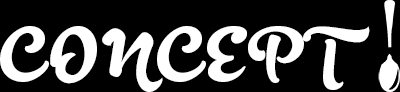
<style>
.page{position:relative;width:400px;height:92px;background:#000000}
.page>*{position:absolute;margin:0}
.t1{font:54.4px "Lactosa";letter-spacing:0.08em;color:#ffffff}
</style>
<div class="page">
<p class="t1" style="left:0px;top:26px;width:370px;height:66px">CONCEPT</p>
</div>
